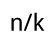
<style>
.page{position:relative;width:53px;height:41px;background:#ffffff}
.page>*{position:absolute;margin:0}
.t1{font:23.7px "DroidSans";color:#000000}
</style>
<div class="page">
<p class="t1" style="left:11px;top:12px;width:34px;height:19px">n/k</p>
</div>
